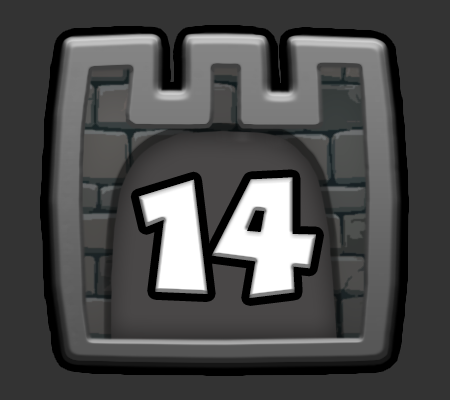
<style>
.page{position:relative;width:450px;height:400px;background:#333333}
.page>*{position:absolute;margin:0}
.t1{font:156.4px "Funhouse";color:#ffffff}
</style>
<div class="page">
<p class="t1" style="left:138px;top:177px;width:178px;height:121px">14</p>
</div>
